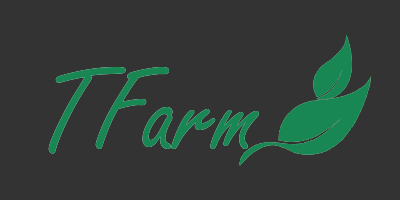
<style>
.page{position:relative;width:400px;height:200px;background:#333333}
.page>*{position:absolute;margin:0}
.t1{font:125px "FreestyleScript-Regular";color:#198754}
</style>
<div class="page">
<p class="t1" style="left:48px;top:67px;width:211px;height:87px">TFarm</p>
</div>
